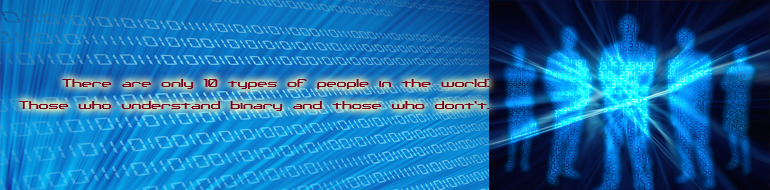
<style>
.page{position:relative;width:770px;height:190px}
.page>*{position:absolute;margin:0}
.t1{font:18px "BinaryCHRBRK";color:#7a0026}
</style>
<div class="page">
<p class="t1" style="left:19px;top:79px;width:471px;height:32px;text-align:right">There are only 10 types of people in the world:<br>Those who understand binary and those who dont’t.</p>
</div>
